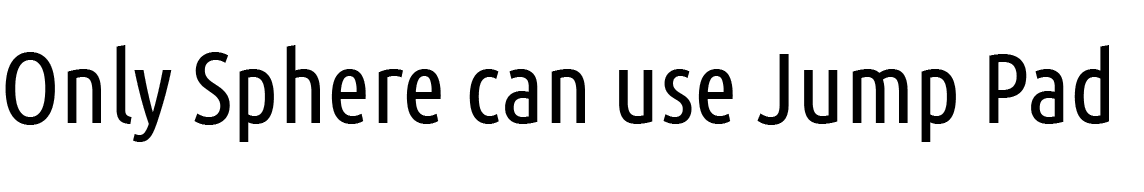
<style>
.page{position:relative;width:1144px;height:192px;background:#ffffff}
.page>*{position:absolute;margin:0}
.t1{font:100px "UbuntuCondensed-Regular";color:#000000}
</style>
<div class="page">
<p class="t1" style="left:5px;top:45px;width:1104px;height:97px">Only Sphere can use Jump Pad</p>
</div>
